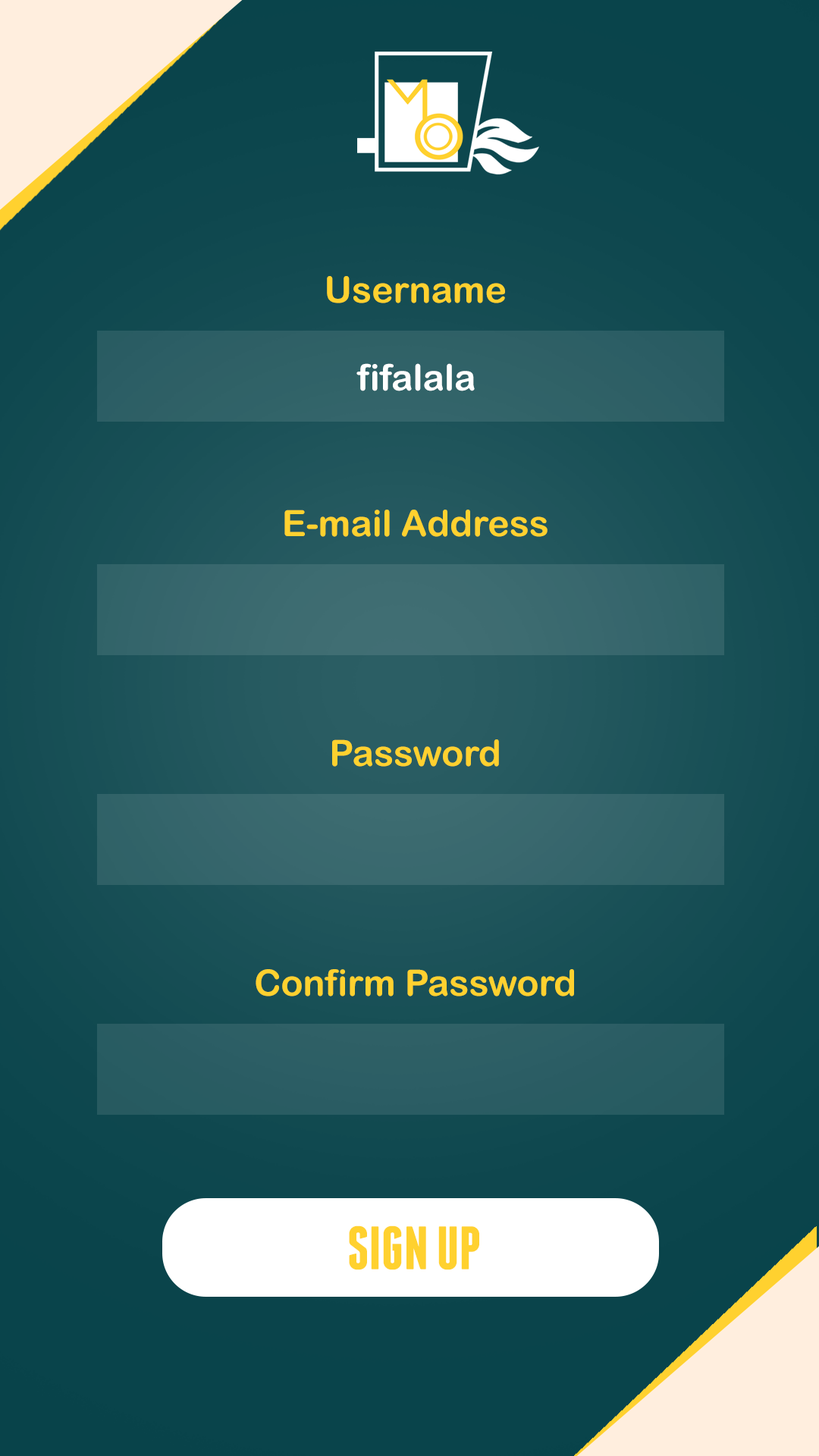
<style>
.page{position:relative;width:819px;height:1456px}
.page>*{position:absolute;margin:0}
.t1{font:36.4px "ArialRoundedMTBold";color:#ffd12f}
.t2{font:36.4px "ArialRoundedMTBold";color:#ffffff}
.t3{font:61.2px "Franchise-Bold";color:#ffd12f}
</style>
<div class="page">
<p class="t1" style="left:327px;top:276px;width:178px;height:27px">Username</p>
<p class="t2" style="left:356px;top:363px;width:119px;height:28px">fifalala</p>
<p class="t1" style="left:284px;top:510px;width:264px;height:27px">E-mail Address</p>
<p class="t1" style="left:332px;top:739px;width:167px;height:28px">Password</p>
<p class="t1" style="left:256px;top:969px;width:318px;height:27px">Confirm Password</p>
<p class="t3" style="left:349px;top:1225px;width:130px;height:45px">SIGN UP</p>
</div>
